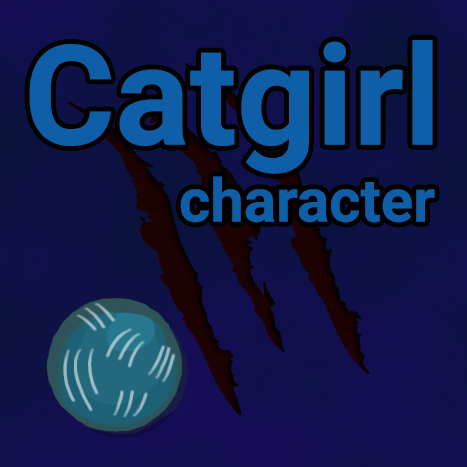
<style>
.page{position:relative;width:467px;height:467px}
.page>*{position:absolute;margin:0}
.t1{font:139.3px "Roboto-Bold";color:#0e5ea8}
.t2{font:60px "Roboto-Bold";color:#0e5ea8}
</style>
<div class="page">
<p class="t1" style="left:29px;top:40px;width:404px;height:134px">Catgirl</p>
<p class="t2" style="left:180px;top:176px;width:255px;height:47px">character</p>
</div>
